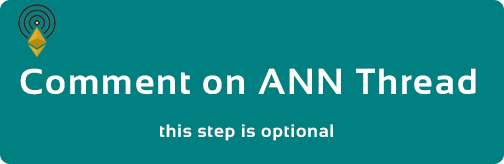
<style>
.page{position:relative;width:504px;height:164px;background:#008080}
.page>*{position:absolute;margin:0}
.t1{font:36px "Sansation-Bold";letter-spacing:0.05em;color:#ffffff}
.t2{font:18px "Sansation-Bold";letter-spacing:0.05em;color:#ffffff}
</style>
<div class="page">
<p class="t1" style="left:20px;top:68px;width:456px;height:27px">Comment on ANN Thread</p>
<p class="t2" style="left:160px;top:124px;width:173px;height:17px">this step is optional</p>
</div>
